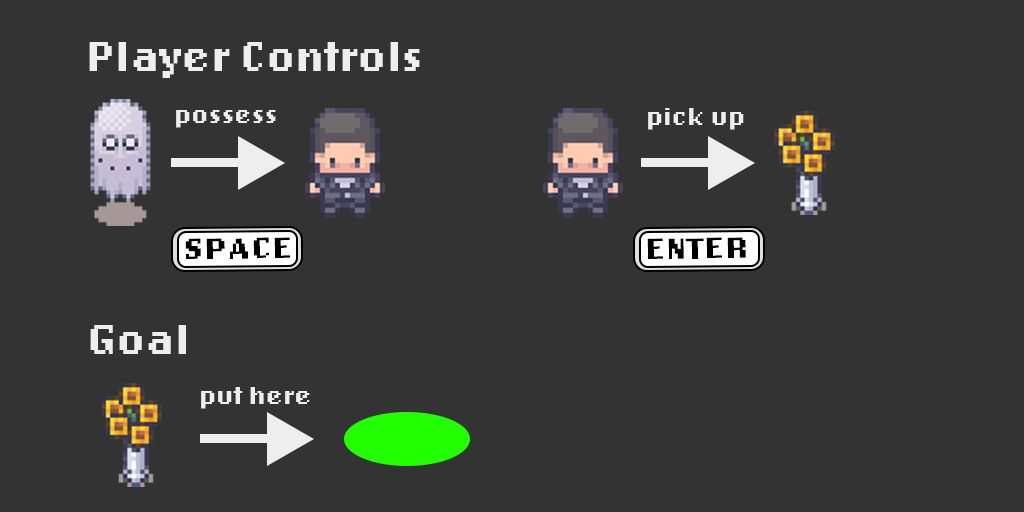
<style>
.page{position:relative;width:1024px;height:512px;background:#333333}
.page>*{position:absolute;margin:0}
.t1{font:44px "LoRes12OT-Bold";color:#eeeeee}
.t2{font:25.9px "LoRes12OT-Bold";color:#eeeeee}
.t3{font:30.3px "LoRes12OT-Bold";color:#000000;scale:1.18 1}
</style>
<div class="page">
<p class="t1" style="left:89px;top:42px;width:331px;height:36px">Player Controls</p>
<p class="t2" style="left:176px;top:110px;width:100px;height:18px">possess</p>
<p class="t2" style="left:648px;top:108px;width:96px;height:22px">pick up</p>
<p class="t3" style="left:185px;top:237px;width:105px;height:22px;rotate:-1deg">SPACE</p>
<p class="t3" style="left:647px;top:237px;width:99px;height:22px;rotate:-1deg">ENTER</p>
<p class="t1" style="left:90px;top:325px;width:96px;height:29px">Goal</p>
<p class="t2" style="left:201px;top:387px;width:109px;height:22px">put here</p>
</div>
